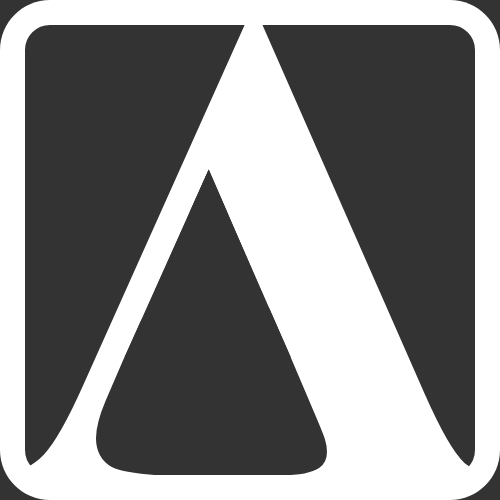
<style>
.page{position:relative;width:500px;height:500px;background:#333333}
.page>*{position:absolute;margin:0}
.t1{font:704px "TimesNewRomanPS-BoldMT";color:#ffffff}
</style>
<div class="page">
<p class="t1" style="left:2px;top:12px;width:496px;height:476px">A</p>
</div>
